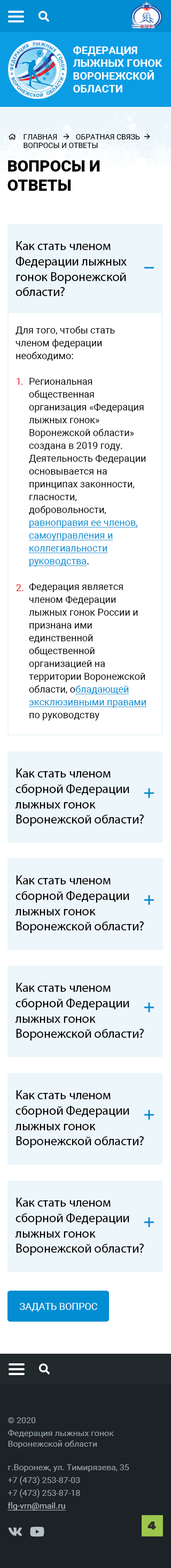
<style>
.page{position:relative;width:171px;height:1568px;background:#ffffff}
.page>*{position:absolute;margin:0}
.t1{font:10.7px "Roboto-Bold";color:#ffffff;text-transform:uppercase}
.t2{font:7.5px "Roboto-Regular";color:#000000;text-transform:uppercase}
.t3{font:16px "Roboto-Black";color:#000000;text-transform:uppercase}
.t4{font:12.8px "MyriadPro-Regular";color:#000000}
.t5{font:9.6px/12.8px "Roboto-Regular";color:#000000}
.t6{font:9.6px/12.8px "Roboto-Regular";color:#008dd2;text-decoration:underline}
.t7{font:9.6px "Roboto-Regular";color:#e31e25}
.t8{font:9.6px "Roboto-Regular";color:#ffffff;text-transform:uppercase}
.t9{font:8.6px/12.8px "Roboto-Regular";color:#94a1a9}
.t10{font:8.6px/10.7px "Roboto-Regular";color:#94a1a9}
.t11{font:8.6px/12.8px "Roboto-Regular";color:#b7c1c7;text-decoration:underline}
</style>
<div class="page">
<p class="t1" style="left:73px;top:46px;width:89px;height:46px">ФЕДЕРАЦИЯ <br>ЛЫЖНЫХ ГОНОК<br>воронежской <br>области</p>
<p class="t2" style="left:24px;top:134px;width:116px;height:14px">Главная          обратная связь          <br>Вопросы и ответы</p>
<p class="t3" style="left:7px;top:160px;width:93px;height:31px">Вопросы и <br>ответы</p>
<p class="t4" style="left:15px;top:241px;width:112px;height:55px">Как стать членом <br>Федерации лыжных <br>гонок Воронежской <br>области?</p>
<p class="t5" style="left:15px;top:326px;width:132px;height:394px">Для того, чтобы стать членом федерации необходимо:<br><br>Региональная общественная организация «Федерация лыжных гонок» Воронежской области» создана в 2019 году. Деятельность Федерации основывается на принципах законности, гласности, добровольности, <span class="t6">равноправия ее членов, самоуправления и коллегиальности руководства</span>.<br><br>Федерация является членом Федерации лыжных гонок России и признана ими единственной общественной организацией на территории Воронежской области, о<span class="t6">бладающей эксклюзивными правами</span> по руководству развитием лыжных гонок и биатлона на территории Воронежской области.<br><br>Целями Федерации являются развитие лыжных гонок на территории Воронежской области, их пропаганда, организация и проведение спортивных мероприятий, подготовка спортсменов – членов сборных команд <span class="t6">Воронежской области по лыжным гонкам</span>.</p>
<p class="t7" style="left:17px;top:378px;width:5px;height:7px">1.</p>
<p class="t7" style="left:16px;top:584px;width:8px;height:7px">2.</p>
<p class="t4" style="left:15px;top:769px;width:129px;height:57px">Как стать членом <br>сборной Федерации <br>лыжных гонок <br>Воронежской области?</p>
<p class="t4" style="left:15px;top:875px;width:129px;height:58px">Как стать членом <br>сборной Федерации <br>лыжных гонок <br>Воронежской области?</p>
<p class="t4" style="left:15px;top:983px;width:129px;height:58px">Как стать членом <br>сборной Федерации <br>лыжных гонок <br>Воронежской области?</p>
<p class="t4" style="left:15px;top:1090px;width:129px;height:58px">Как стать членом <br>сборной Федерации <br>лыжных гонок <br>Воронежской области?</p>
<p class="t4" style="left:15px;top:1198px;width:129px;height:57px">Как стать членом <br>сборной Федерации <br>лыжных гонок <br>Воронежской области?</p>
<p class="t8" style="left:20px;top:1303px;width:77px;height:8px">Задать вопрос</p>
<p class="t9" style="left:8px;top:1417px;width:106px;height:31px">© 2020 <br>Федерация лыжных гонок <br><span class="t10">Воронежской области</span></p>
<p class="t9" style="left:7px;top:1464px;width:122px;height:47px">г.Воронеж, ул. Тимирязева, 35<br>+7 (473) 253-87-03<br>+7 (473) 253-87-18<br><span class="t11">flg-vrn@mail.ru</span></p>
</div>
